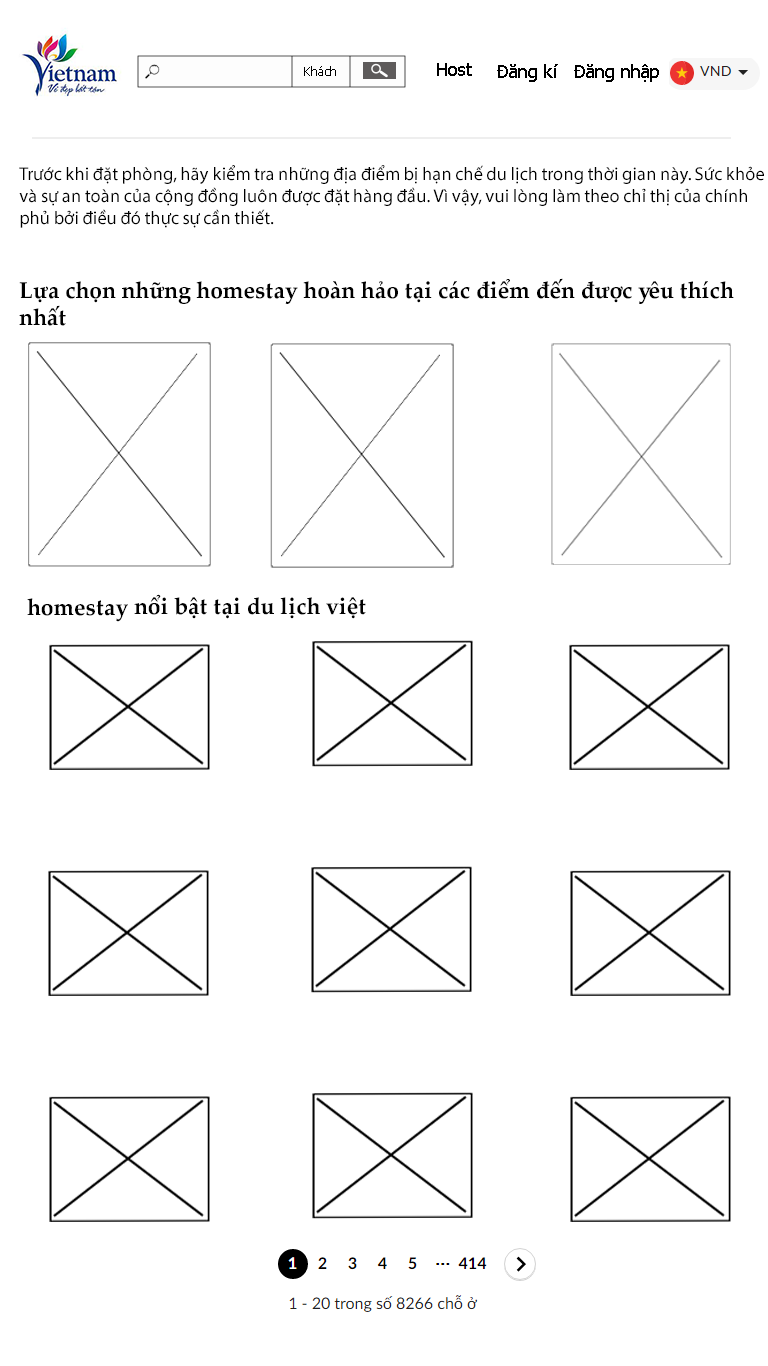
<style>
.page{position:relative;width:768px;height:1366px;background:#ffffff}
.page>*{position:absolute;margin:0}
.t1{font:18px "Tahoma";color:#000000}
.t2{font:12px "Tahoma";color:#000000}
.t3{font:18.4px "MyriadPro-Regular";color:#000000}
.t4{font:23px "PalatinoLinotype-Bold";color:#000000}
</style>
<div class="page">
<p class="t1" style="left:437px;top:63px;width:35px;height:13px">Host</p>
<p class="t1" style="left:497px;top:64px;width:61px;height:18px">Đăng kí</p>
<p class="t1" style="left:574px;top:64px;width:85px;height:18px">Đăng nhập</p>
<p class="t2" style="left:304px;top:66px;width:32px;height:10px">Khách</p>
<p class="t3" style="left:19px;top:165px;width:745px;height:63px">Trước khi đặt phòng, hãy kiểm tra những địa điểm bị hạn chế du lịch trong thời gian này. Sức khỏe và sự an toàn của cộng đồng luôn được đặt hàng đầu. Vì vậy, vui lòng làm theo chỉ thị của chính phủ bởi điều đó thực sự cần thiết.</p>
<p class="t4" style="left:19px;top:278px;width:715px;height:48px">Lựa chọn những homestay hoàn hảo tại các điểm đến được yêu thích nhất</p>
<p class="t4" style="left:27px;top:594px;width:339px;height:28px">homestay nổi bật tại du lịch việt</p>
</div>
